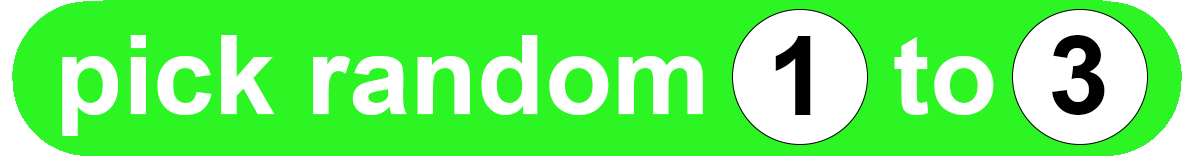
<style>
.page{position:relative;width:1200px;height:162px;background:#2df524}
.page>*{position:absolute;margin:0}
.t1{font:110px "Arial-BoldMT";color:#ffffff}
.t2{font:110px "Arial-BoldMT";color:#000000}
</style>
<div class="page">
<p class="t1" style="left:62px;top:35px;width:932px;height:101px">pick random      to</p>
<p class="t2" style="left:775px;top:36px;width:36px;height:79px">1</p>
<p class="t2" style="left:1052px;top:35px;width:53px;height:80px">3</p>
</div>
